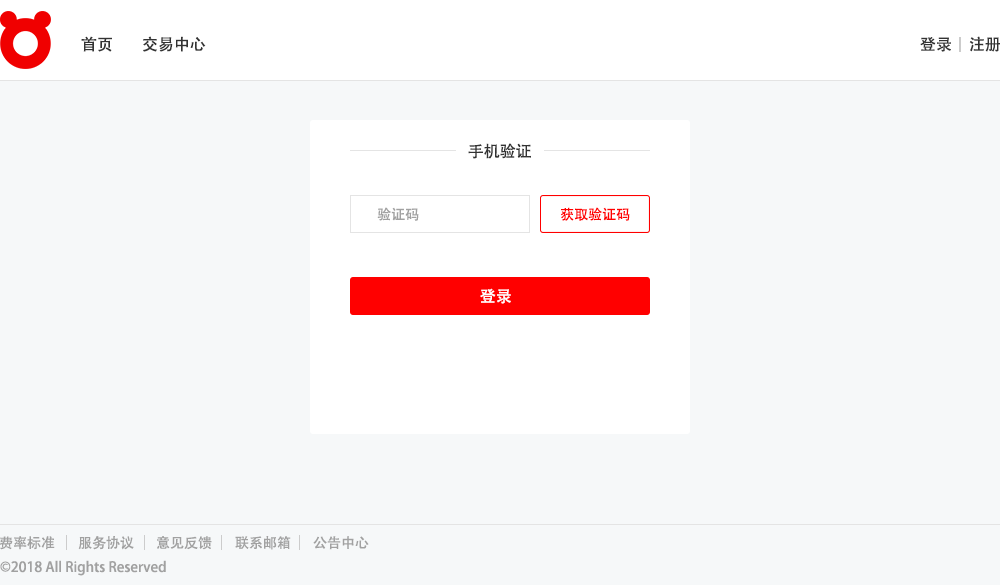
<style>
.page{position:relative;width:1000px;height:585px;background:#f6f8f9}
.page>*{position:absolute;margin:0}
.t1{font:16px "AdobeHeitiStd-Regular";color:#333333}
.t2{font:14px "AdobeHeitiStd-Regular";color:#a1a1a1}
.t3{font:14px "AdobeHeitiStd-Regular";color:#ff0000}
.t4{font:16px "AdobeHeitiStd-Regular";color:#ffffff}
</style>
<div class="page">
<p class="t1" style="left:81px;top:36px;width:31px;height:16px">首页</p>
<p class="t1" style="left:143px;top:36px;width:63px;height:16px">交易中心</p>
<p class="t1" style="left:920px;top:37px;width:31px;height:15px">登录</p>
<p class="t1" style="left:969px;top:36px;width:32px;height:16px">注册</p>
<p class="t1" style="left:468px;top:143px;width:63px;height:16px">手机验证</p>
<p class="t2" style="left:377px;top:207px;width:42px;height:14px">验证码</p>
<p class="t3" style="left:561px;top:207px;width:69px;height:14px">获取验证码</p>
<p class="t4" style="left:480px;top:288px;width:31px;height:16px">登录</p>
<p class="t2" style="left:0px;top:536px;width:55px;height:14px">费率标准</p>
<p class="t2" style="left:78px;top:536px;width:56px;height:14px">服务协议</p>
<p class="t2" style="left:157px;top:536px;width:55px;height:14px">意见反馈</p>
<p class="t2" style="left:235px;top:536px;width:56px;height:14px">联系邮箱</p>
<p class="t2" style="left:313px;top:536px;width:56px;height:14px">公告中心</p>
<p class="t2" style="left:0px;top:560px;width:166px;height:16px">©2018 All Rights Reserved</p>
</div>
